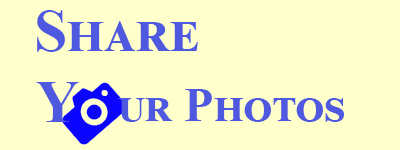
<style>
.page{position:relative;width:400px;height:150px;background:#ffffcc}
.page>*{position:absolute;margin:0}
.t1{font:60px "TimesNewRomanPS-BoldMT";color:#4f59df;font-variant:small-caps}
.t2{font:72px "Sosa-Regular";color:#0b05fd;font-variant:small-caps}
.t3{font:48px "TimesNewRomanPS-BoldMT";color:#4f59df;font-variant:small-caps}
</style>
<div class="page">
<p class="t1" style="left:37px;top:10px;width:161px;height:42px">Share</p>
<p class="t1" style="left:36px;top:82px;width:43px;height:40px">Y</p>
<p class="t2" style="left:62px;top:82px;width:65px;height:63px;rotate:-41deg">1</p>
<p class="t3" style="left:118px;top:89px;width:226px;height:33px">ur Photos</p>
</div>
